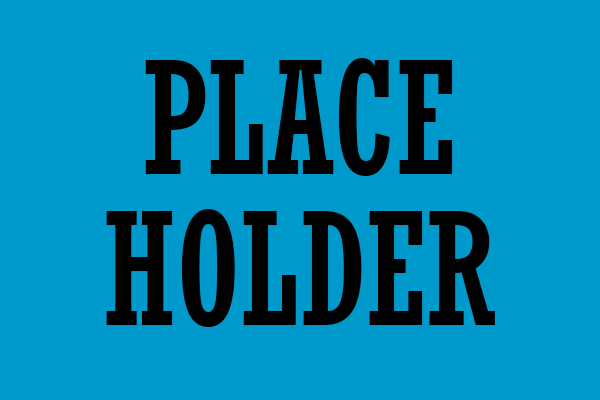
<style>
.page{position:relative;width:600px;height:400px;background:#0099cc}
.page>*{position:absolute;margin:0}
.t1{font:155px/151.5px "Rockwell-Condensed";color:#000000}
</style>
<div class="page">
<p class="t1" style="left:106px;top:58px;width:389px;height:269px;text-align:center">PLACE<br>HOLDER</p>
</div>
